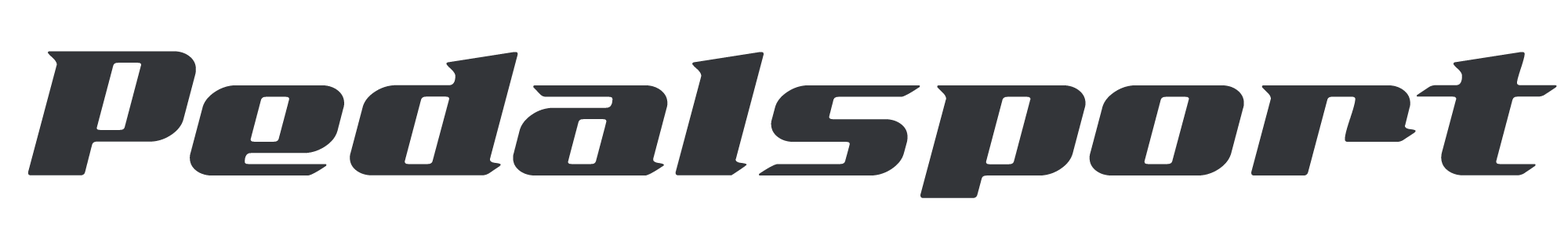
<style>
.page{position:relative;width:1568px;height:235px;background:#ffffff}
.page>*{position:absolute;margin:0}
.t1{font:253.5px "AddCityboyNormal";color:#333539}
</style>
<div class="page">
<p class="t1" style="left:28px;top:51px;width:1529px;height:147px">Pedalsport</p>
</div>
